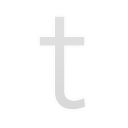
<style>
.page{position:relative;width:128px;height:128px;background:#ffffff}
.page>*{position:absolute;margin:0}
.t1{font:151.8px "AvenirLTStd-Light";color:#dedede}
</style>
<div class="page">
<p class="t1" style="left:39px;top:16px;width:46px;height:94px">t</p>
</div>
